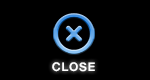
<style>
.page{position:relative;width:150px;height:80px;background:#000000}
.page>*{position:absolute;margin:0}
.t1{font:12px "AlteHaasGrotesk_Bold";letter-spacing:0.05em;color:#ffffff}
</style>
<div class="page">
<p class="t1" style="left:52px;top:62px;width:43px;height:10px">CLOSE</p>
</div>
